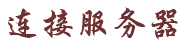
<style>
.page{position:relative;width:186px;height:48px;background:#ffffff}
.page>*{position:absolute;margin:0}
.t1{font:36px "STXingkai";color:#6e3030}
</style>
<div class="page">
<p class="t1" style="left:8px;top:7px;width:170px;height:33px">连接服务器</p>
</div>
